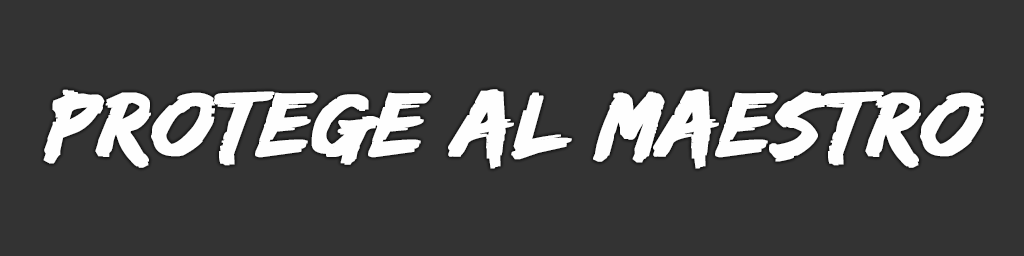
<style>
.page{position:relative;width:1024px;height:256px;background:#333333}
.page>*{position:absolute;margin:0}
.t1{font:94px "EdoSZ";color:#fefefe;font-weight:bold;font-style:italic;scale:1.04 1}
</style>
<div class="page">
<p class="t1" style="left:43px;top:89px;width:941px;height:80px">PROTEGE AL MAESTRO</p>
</div>
